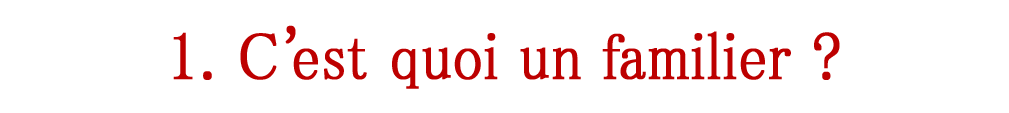
<style>
.page{position:relative;width:1009px;height:113px;background:#ffffff}
.page>*{position:absolute;margin:0}
.t1{font:66.6px "MS-PMincho";color:#bd0000;font-weight:bold;scale:0.89 1}
.t2{font:66.6px "MS-PMincho";letter-spacing:-0.15em;color:#bd0000;font-weight:bold;scale:0.89 1}
</style>
<div class="page">
<p class="t1" style="left:173px;top:25px;width:667px;height:64px">1. C<span class="t2">'</span>est quoi un familier ?</p>
</div>
